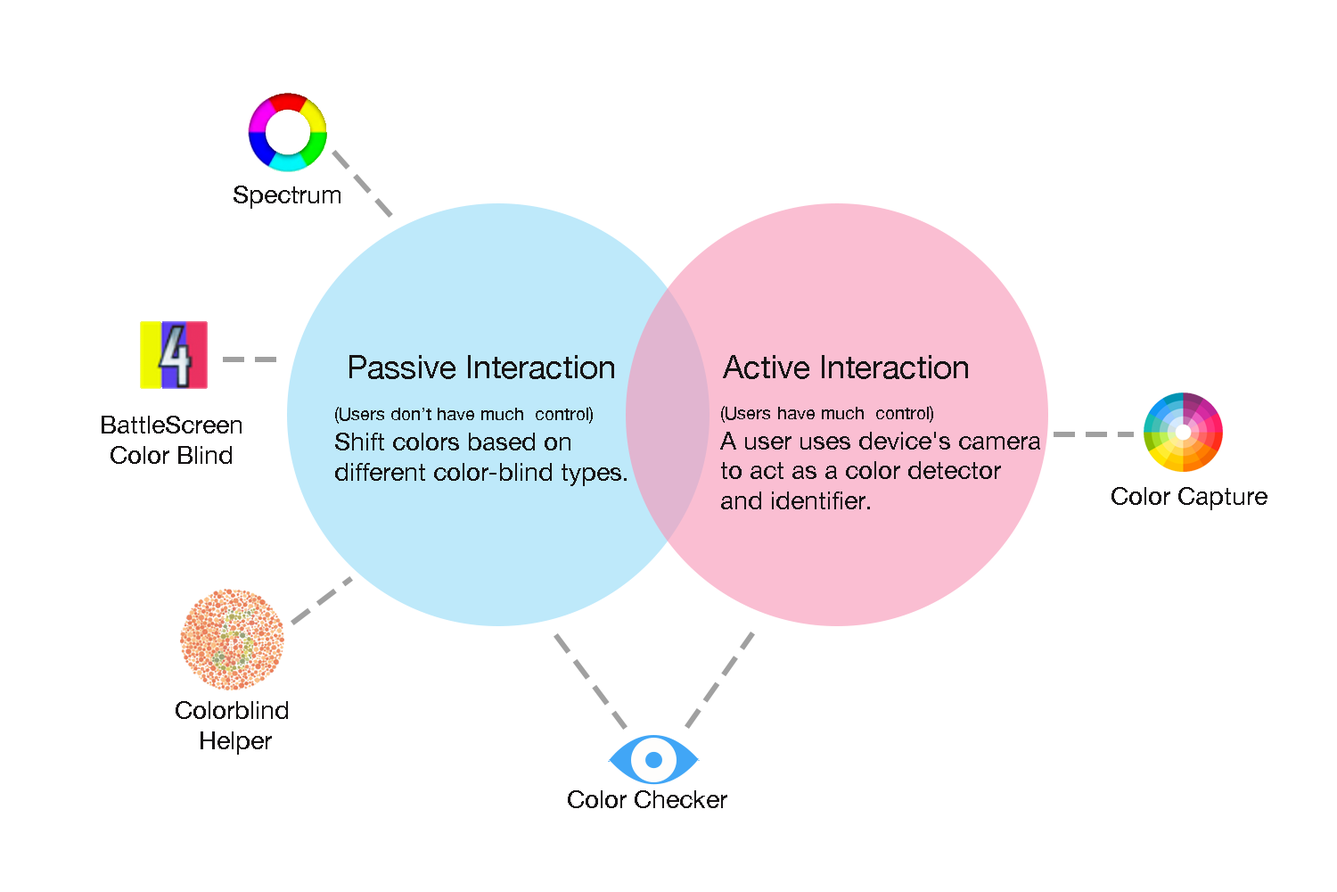
<style>
.page{position:relative;width:1337px;height:892px;background:#ffffff}
.page>*{position:absolute;margin:0}
.t1{font:25px "HelveticaNeue";color:#171516}
.t2{font:32.1px "HelveticaNeue";color:#171516}
.t3{font:17.8px "HelveticaNeue";color:#171516}
</style>
<div class="page">
<p class="t1" style="left:234px;top:185px;width:107px;height:24px">Spectrum</p>
<p class="t2" style="left:350px;top:355px;width:618px;height:24px">Passive Interaction            Active Interaction</p>
<p class="t1" style="left:335px;top:407px;width:292px;height:79px"><span class="t3">(Users don’t have much  control)<br></span>Shift colors based on                         <br>different color-blind types.</p>
<p class="t1" style="left:720px;top:406px;width:321px;height:103px"><span class="t3">(Users have much  control)<br></span>A user uses device's camera <br>to act as a color detector <br>and identifier.</p>
<p class="t1" style="left:102px;top:415px;width:140px;height:49px;text-align:center">BattleScreen<br>Color Blind</p>
<p class="t1" style="left:1112px;top:487px;width:156px;height:23px">Color Capture</p>
<p class="t1" style="left:176px;top:701px;width:112px;height:53px;text-align:center">Colorblind <br>Helper</p>
<p class="t1" style="left:568px;top:790px;width:160px;height:18px">Color Checker</p>
</div>
